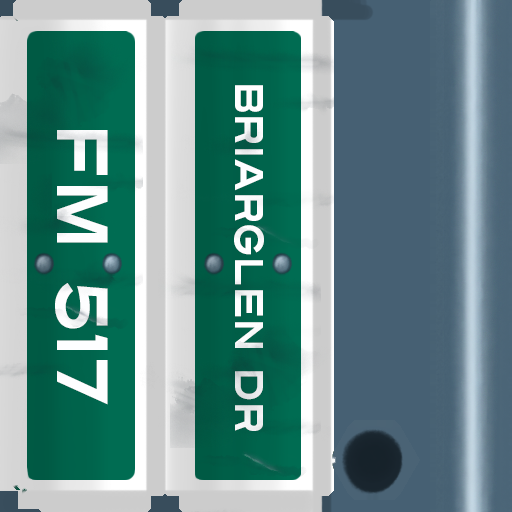
<style>
.page{position:relative;width:512px;height:512px}
.page>*{position:absolute;margin:0}
.t1{font:40px "Turnpike";color:#fefeff;scale:0.75 1}
.t2{font:72px "Turnpike";color:#fefeff;scale:0.75 1}
</style>
<div class="page">
<p class="t1" style="left:234px;top:85px;width:30px;height:346px;rotate:90deg">Briarglen Dr</p>
<p class="t2" style="left:55px;top:130px;width:53px;height:275px;rotate:90deg">FM 517</p>
</div>
